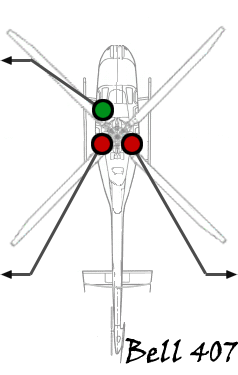
<style>
.page{position:relative;width:238px;height:375px;background:#ffffff}
.page>*{position:absolute;margin:0}
.t1{font:30px "VinerHandITC";color:#000000}
</style>
<div class="page">
<p class="t1" style="left:125px;top:338px;width:113px;height:26px">Bell 407</p>
</div>
